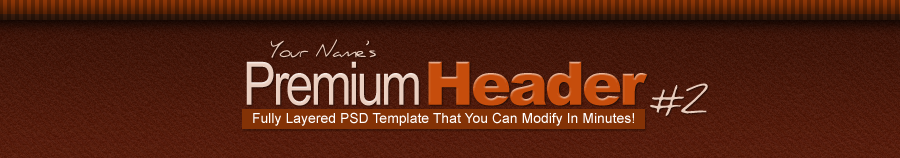
<style>
.page{position:relative;width:900px;height:158px}
.page>*{position:absolute;margin:0}
.t1{font:20px "Daniel";letter-spacing:-0.05em;color:#e9cdbe}
.t2{font:60px "ArialNarrow";letter-spacing:-0.05em;color:#e9cdbe}
.t3{font:60px "Arial-Black";letter-spacing:-0.05em;color:#c64d0c}
.t4{font:39.1px "Daniel";letter-spacing:-0.05em;color:#e9cdbe}
.t5{font:14px "ArialMT";color:#fffefe}
</style>
<div class="page">
<p class="t1" style="left:270px;top:39px;width:106px;height:19px">Your Name’s</p>
<p class="t2" style="left:246px;top:61px;width:173px;height:45px">Premium</p>
<p class="t3" style="left:428px;top:61px;width:220px;height:45px">Header</p>
<p class="t4" style="left:650px;top:83px;width:58px;height:33px">#2</p>
<p class="t5" style="left:253px;top:112px;width:381px;height:14px">Fully Layered PSD Template That You Can Modify In Minutes!</p>
</div>
